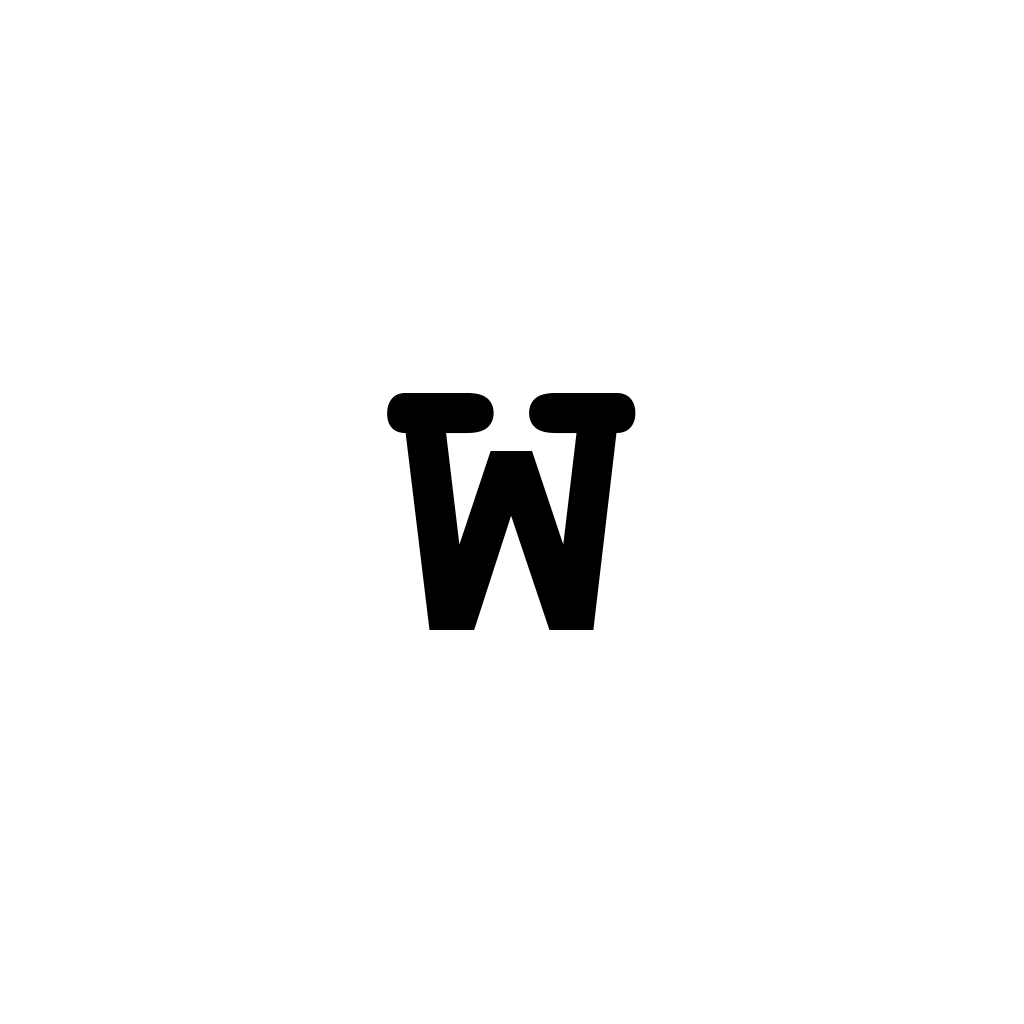
<style>
.page{position:relative;width:1024px;height:1024px;background:#ffffff}
.page>*{position:absolute;margin:0}
.t1{font:400px "CourierNewPS-BoldMT";color:#000000}
</style>
<div class="page">
<p class="t1" style="left:387px;top:393px;width:249px;height:237px">W</p>
</div>
